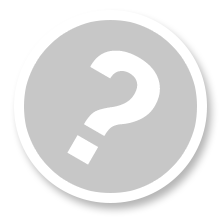
<style>
.page{position:relative;width:221px;height:221px;background:#ffffff}
.page>*{position:absolute;margin:0}
.t1{font:163.4px "Roboto-Bold";letter-spacing:-0.01em;color:#ffffff}
</style>
<div class="page">
<p class="t1" style="left:67px;top:50px;width:93px;height:115px;rotate:30deg">?</p>
</div>
